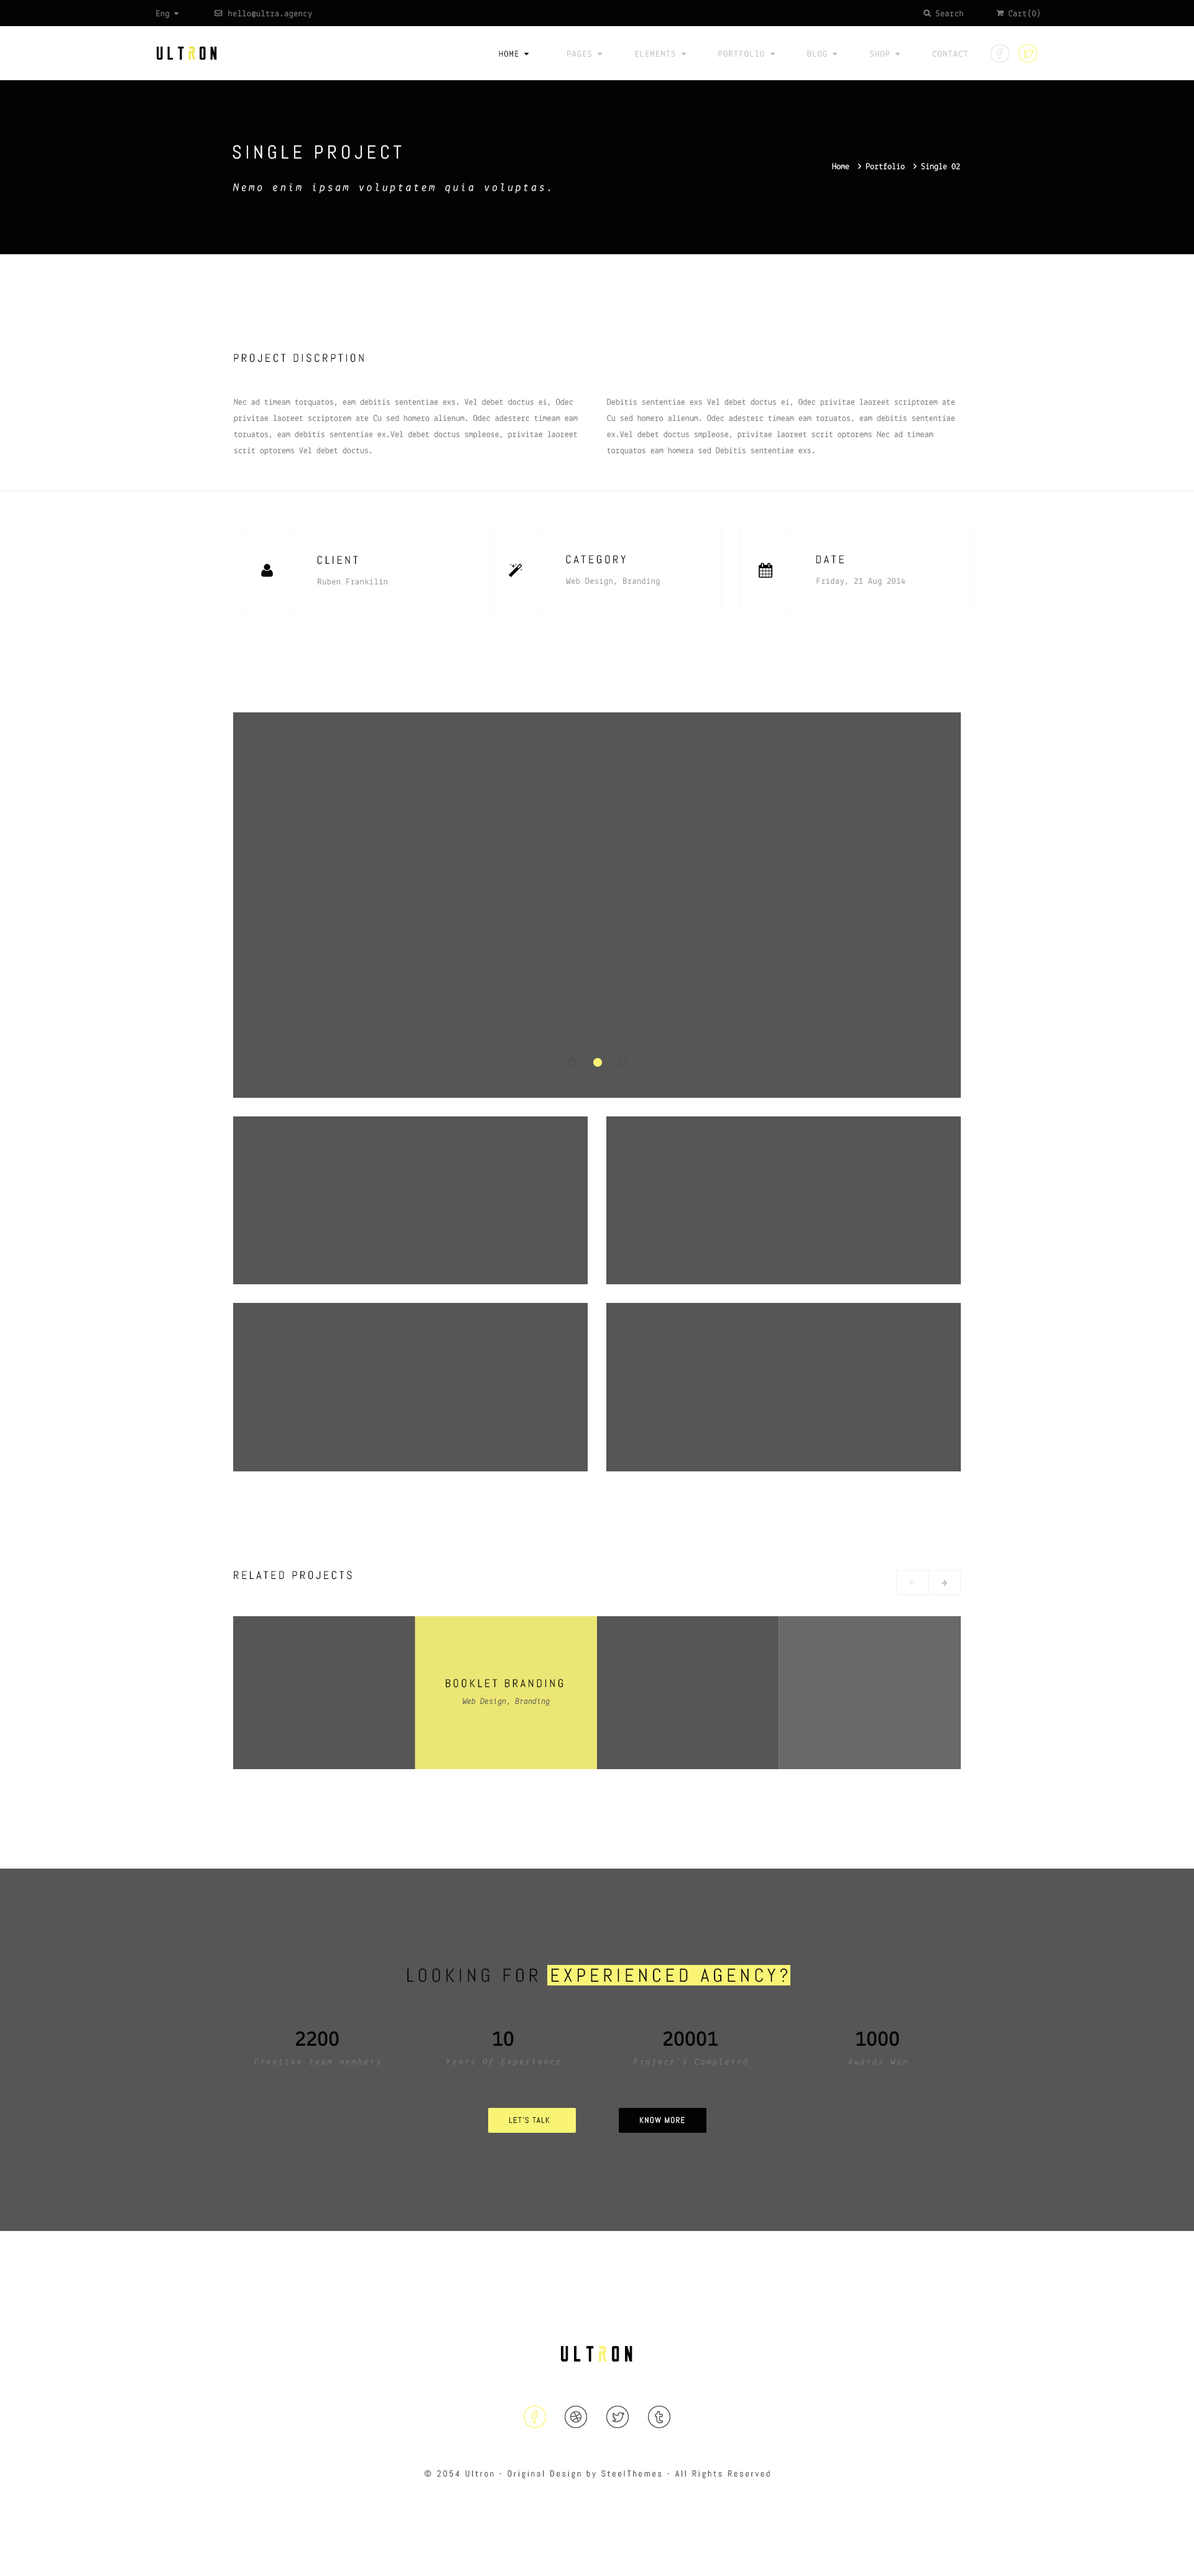
<style>
.page{position:relative;width:1194px;height:2576px;background:#ffffff}
.page>*{position:absolute;margin:0}
.t1{font:8.7px "Lekton-Regular";letter-spacing:0.04em;color:#787878}
.t2{font:8.7px "Lekton-Regular";letter-spacing:0.1em;color:#bfbfbf;text-transform:uppercase}
.t3{font:8.7px "Lekton-Regular";letter-spacing:0.1em;color:#030303;text-transform:uppercase}
.t4{font:18.6px "Abel-Regular";letter-spacing:0.2em;color:#ffffff;text-transform:uppercase}
.t5{font:11.2px "Lekton-Italic";letter-spacing:0.2em;color:#ffffff}
.t6{font:11.2px "Abel-Regular";letter-spacing:0.2em;color:#030303;text-transform:uppercase}
.t7{font:8.7px/16.2px "Lekton-Regular";color:#787878}
.t8{font:8.7px "Lekton-Regular";letter-spacing:0.04em;color:#969595}
.t9{font:11.1px "Abel-Regular";letter-spacing:0.2em;color:#030303;text-transform:uppercase}
.t10{font:8.6px "Lekton-Italic";color:#545454}
.t11{font:18.6px "Abel-Regular";letter-spacing:0.2em;color:#0b0b0b;text-transform:uppercase}
.t12{font:8.7px/18.6px "Lekton-Italic";letter-spacing:0.2em;color:#787878}
.t13{font:22.4px/18.6px "Lekton-Bold";color:#030303;text-transform:uppercase}
.t14{font:8.1px "Abel-Regular";letter-spacing:0.1em;color:#030303;text-transform:uppercase}
.t15{font:8.1px "Abel-Regular";letter-spacing:0.1em;color:#ffffff;text-transform:uppercase}
.t16{font:22.4px "ReckonerBold";letter-spacing:0.2em;color:#030303}
.t17{font:22.4px "ReckonerBold";letter-spacing:0.2em;color:#faf476}
.t18{font:8.7px "Abel-Regular";letter-spacing:0.2em;color:#4f4f4f}
</style>
<div class="page">
<p class="t1" style="left:156px;top:10px;width:13px;height:8px">Eng</p>
<p class="t1" style="left:228px;top:10px;width:84px;height:8px">hello@ultra.agency</p>
<p class="t1" style="left:936px;top:10px;width:27px;height:7px">Search</p>
<p class="t1" style="left:1008px;top:9px;width:31px;height:9px">Cart(0)</p>
<p class="t2" style="left:499px;top:50px;width:468px;height:7px"><span class="t3">Home         </span>Pages        Elements        Portfolio        Blog        Shop        Contact</p>
<p class="t4" style="left:232px;top:145px;width:170px;height:14px">Single Project</p>
<p class="t5" style="left:232px;top:183px;width:318px;height:10px">Nemo enim ipsam voluptatem quia voluptas.</p>
<p class="t6" style="left:234px;top:354px;width:130px;height:8px">project discrption</p>
<p class="t7" style="left:234px;top:398px;width:343px;height:57px">Nec ad timeam torquatos, eam debitis sententiae exs. Vel debet doctus ei, Odec privitae laoreet scriptorem ate Cu sed homero alienum. Odec adesterc timeam eam toruatos, eam debitis sententiae ex.Vel debet doctus smpleose, privitae laoreet scrit optorems Vel debet doctus.</p>
<p class="t7" style="left:607px;top:398px;width:347px;height:57px">Debitis sententiae exs Vel debet doctus ei, Odec privitae laoreet scriptorem ate Cu sed homero alienum. Odec adesterc timeam eam toruatos, eam debitis sententiae ex.Vel debet doctus smpleose, privitae laoreet scrit optorems Nec ad timeam torquatos eam homera sed Debitis sententiae exs.</p>
<p class="t6" style="left:317px;top:556px;width:41px;height:8px">Client</p>
<p class="t6" style="left:566px;top:555px;width:59px;height:9px">category</p>
<p class="t6" style="left:816px;top:555px;width:28px;height:9px">Date</p>
<p class="t8" style="left:318px;top:578px;width:69px;height:7px">Ruben Frankilin</p>
<p class="t8" style="left:566px;top:577px;width:94px;height:9px">Web Design, Branding</p>
<p class="t8" style="left:816px;top:577px;width:89px;height:9px">Friday, 21 Aug 2014</p>
<p class="t6" style="left:234px;top:1571px;width:118px;height:9px">Related Projects</p>
<p class="t9" style="left:445px;top:1679px;width:118px;height:9px">Booklet branding</p>
<p class="t10" style="left:462px;top:1698px;width:88px;height:8px">Web Design, Branding</p>
<p class="t11" style="left:407px;top:1968px;width:381px;height:14px">Looking for Experienced Agency?</p>
<p class="t12" style="left:254px;top:2031px;width:126px;height:34px;text-align:center"><span class="t13">2200<br></span>Creative team members</p>
<p class="t12" style="left:446px;top:2031px;width:114px;height:35px;text-align:center"><span class="t13">10<br></span>Years Of Experience</p>
<p class="t12" style="left:633px;top:2031px;width:114px;height:35px;text-align:center"><span class="t13">20001<br></span>Project’s Completed</p>
<p class="t12" style="left:847px;top:2031px;width:60px;height:34px;text-align:center"><span class="t13">1000<br></span>Awards Won</p>
<p class="t14" style="left:509px;top:2117px;width:41px;height:6px">Let’s Talk</p>
<p class="t15" style="left:640px;top:2117px;width:44px;height:6px">Know More</p>
<p class="t16" style="left:561px;top:2346px;width:71px;height:16px">Ult<span class="t17">r</span>on</p>
<p class="t18" style="left:424px;top:2470px;width:346px;height:8px">© 2054 Ultron - Original Design by SteelThemes - All Rights Reserved</p>
</div>
